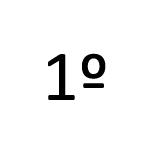
<style>
.page{position:relative;width:150px;height:150px;background:#ffffff}
.page>*{position:absolute;margin:0}
.t1{font:72px "Calibri";color:#000000}
</style>
<div class="page">
<p class="t1" style="left:48px;top:53px;width:58px;height:47px">1º</p>
</div>
